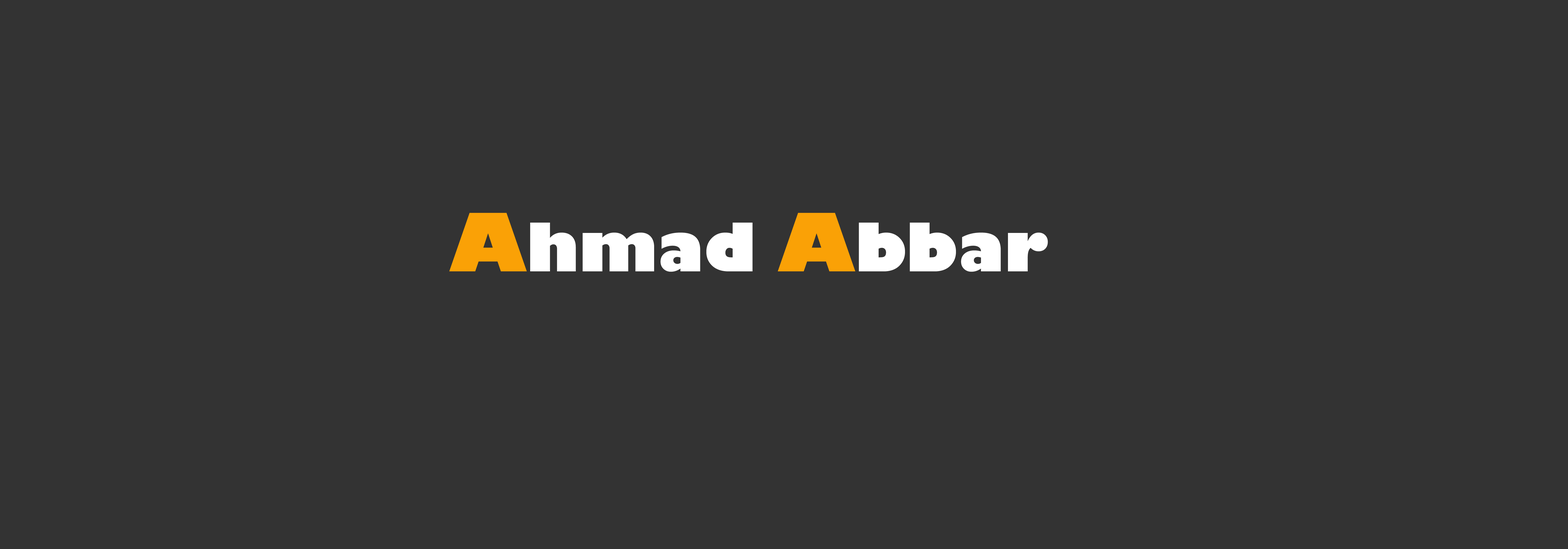
<style>
.page{position:relative;width:1568px;height:549px;background:#333333}
.page>*{position:absolute;margin:0}
.t1{font:65.3px "GillSans-UltraBold";color:#ffffff}
.t2{font:78.4px "GillSans-UltraBold";color:#faa106}
</style>
<div class="page">
<p class="t1" style="left:449px;top:213px;width:599px;height:59px"><span class="t2">A</span>hmad <span class="t2">A</span>bbar</p>
</div>
